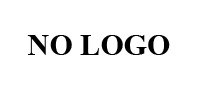
<style>
.page{position:relative;width:200px;height:90px;background:#ffffff}
.page>*{position:absolute;margin:0}
.t1{font:30px "TimesNewRomanPS-BoldMT";color:#000000}
</style>
<div class="page">
<p class="t1" style="left:27px;top:35px;width:143px;height:20px">NO LOGO</p>
</div>
